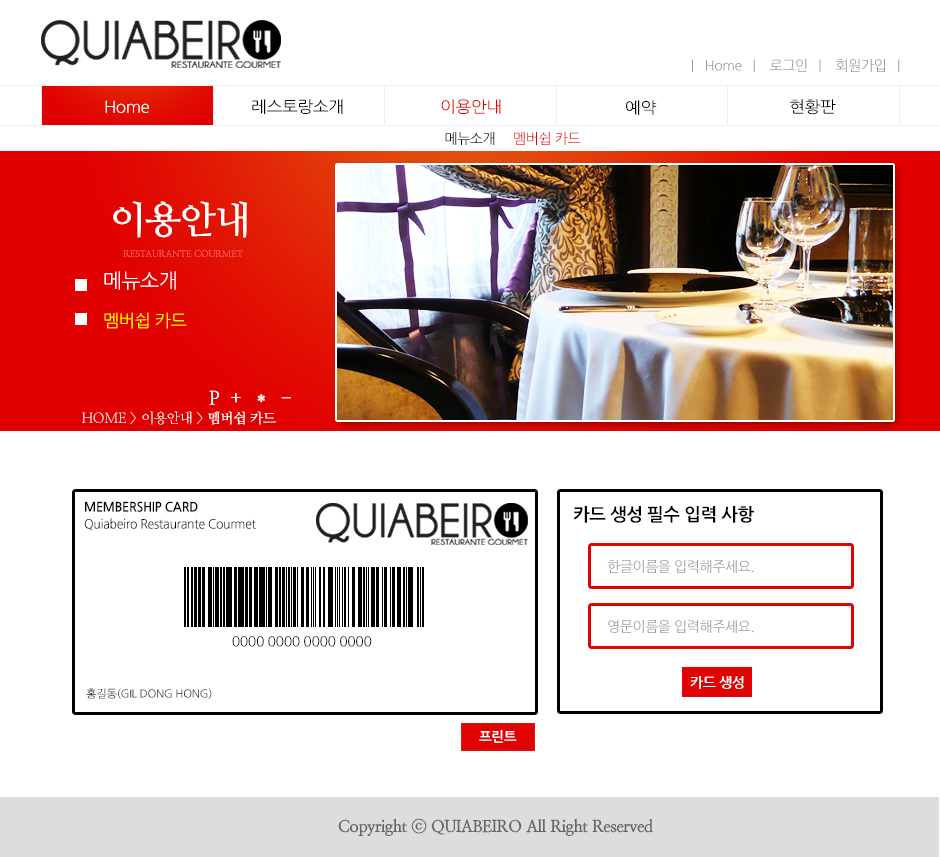
<style>
.page{position:relative;width:940px;height:857px;background:#ffffff}
.page>*{position:absolute;margin:0}
.t1{font:13.9px "NanumGothic";letter-spacing:-0.025em;color:#999999}
.t2{font:16px "NanumGothic";letter-spacing:-0.025em;color:#ffffff;scale:1.06 1}
.t3{font:16px "NanumGothic";letter-spacing:-0.025em;color:#000000;scale:1.06 1}
.t4{font:16px "NanumGothic";letter-spacing:-0.025em;color:#e10301;scale:1.06 1}
.t5{font:13.9px "NanumGothic";letter-spacing:-0.025em;color:#e10301}
.t6{font:13.9px "NanumGothic";letter-spacing:-0.025em;color:#000000}
.t7{font:38px "NanumMyeongjoBold";letter-spacing:-0.025em;color:#ffffff}
.t8{font:9.2px "NanumMyeongjoBold";letter-spacing:-0.025em;color:#ff6060;scale:1.03 1}
.t9{font:20px "NanumGothic";letter-spacing:-0.025em;color:#ffffff}
.t10{font:17px "NanumGothic";letter-spacing:-0.025em;color:#ffff00}
.t11{font:19.3px "NanumMyeongjoBold";letter-spacing:-0.025em;color:#ffffff}
.t12{font:13.9px "NanumMyeongjo";letter-spacing:-0.025em;color:#ffffff}
.t13{font:13.9px "NanumMyeongjoBold";letter-spacing:-0.025em;color:#ffffff}
.t14{font:12.9px "NanumGothicBold";letter-spacing:-0.025em;color:#000000}
.t15{font:17.9px "NanumGothicBold";letter-spacing:-0.025em;color:#000000}
.t16{font:12.7px "NanumGothic";letter-spacing:-0.025em;color:#000000;scale:0.96 1}
.t17{font:13.9px "NanumGothicBold";letter-spacing:-0.025em;color:#ffffff}
.t18{font:10.8px "NanumGothic";letter-spacing:-0.025em;scale:1.04 1}
.t19{font:13.7px "NanumGothicBold";letter-spacing:-0.025em;color:#ffffff}
.t20{font:16.5px "NanumMyeongjoExtraBold";letter-spacing:-0.025em;color:#666666}
</style>
<div class="page">
<p class="t1" style="left:692px;top:59px;width:208px;height:13px">|   Home   |    로그인   |    회원가입   |</p>
<p class="t2" style="left:105px;top:100px;width:44px;height:13px">Home</p>
<p class="t3" style="left:252px;top:99px;width:91px;height:15px">레스토랑소개</p>
<p class="t4" style="left:441px;top:99px;width:60px;height:15px">이용안내</p>
<p class="t3" style="left:626px;top:100px;width:31px;height:15px">예약</p>
<p class="t3" style="left:790px;top:99px;width:46px;height:16px">현황판</p>
<p class="t5" style="left:445px;top:132px;width:136px;height:13px"><span class="t6">메뉴소개     </span>멤버쉽 카드</p>
<p class="t7" style="left:113px;top:201px;width:134px;height:37px">이용안내</p>
<p class="t8" style="left:123px;top:250px;width:120px;height:7px">RESTAURANTE COURMET</p>
<p class="t9" style="left:104px;top:271px;width:72px;height:19px">메뉴소개</p>
<p class="t10" style="left:104px;top:312px;width:83px;height:17px">멤버쉽 카드</p>
<p class="t11" style="left:209px;top:390px;width:82px;height:15px">P  +  ＊  -</p>
<p class="t12" style="left:82px;top:411px;width:194px;height:14px">HOME &gt; 이용안내 &gt;<span class="t13"> 멤버쉽 카드</span></p>
<p class="t14" style="left:85px;top:501px;width:113px;height:11px">MEMBERSHIP CARD</p>
<p class="t15" style="left:573px;top:506px;width:181px;height:17px">카드 생성 필수 입력 사항</p>
<p class="t16" style="left:84px;top:518px;width:172px;height:13px">Quiabeiro Restaurante Courmet</p>
<p class="t1" style="left:607px;top:560px;width:147px;height:13px">한글이름을 입력해주세요.</p>
<p class="t1" style="left:608px;top:620px;width:146px;height:13px">영문이름을 입력해주세요.</p>
<p class="t6" style="left:232px;top:636px;width:140px;height:11px">0000 0000 0000 0000</p>
<p class="t17" style="left:690px;top:676px;width:54px;height:13px">카드 생성</p>
<p class="t18" style="left:86px;top:688px;width:126px;height:11px">홍길동(GIL DONG HONG)</p>
<p class="t19" style="left:479px;top:730px;width:38px;height:13px">프린트</p>
<p class="t20" style="left:338px;top:818px;width:315px;height:18px">Copyright ⓒ QUIABEIRO All Right Reserved</p>
</div>
